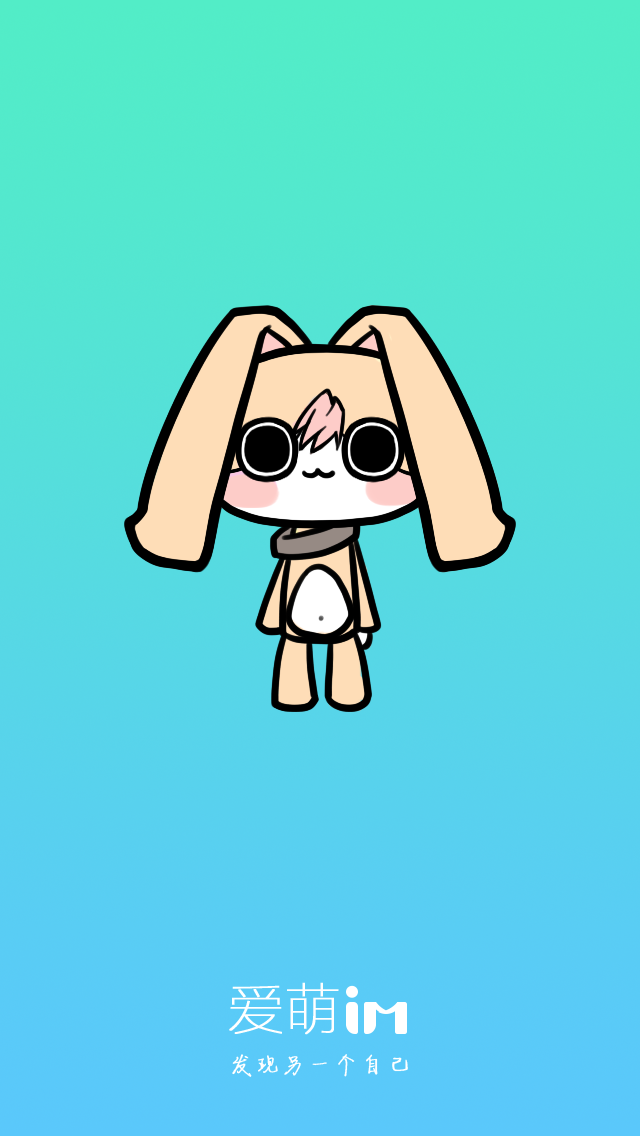
<style>
.page{position:relative;width:640px;height:1136px}
.page>*{position:absolute;margin:0}
.t1{font:56px "FZLTCXHJW--GB1-0";color:#ffffff;font-weight:bold}
.t2{font:24px "FZJLJW--GB1-0";letter-spacing:0.05em;color:#ffffff;font-weight:bold}
</style>
<div class="page">
<p class="t1" style="left:229px;top:982px;width:110px;height:53px">爱萌</p>
<p class="t2" style="left:232px;top:1054px;width:176px;height:23px">发现另一个自己</p>
</div>
